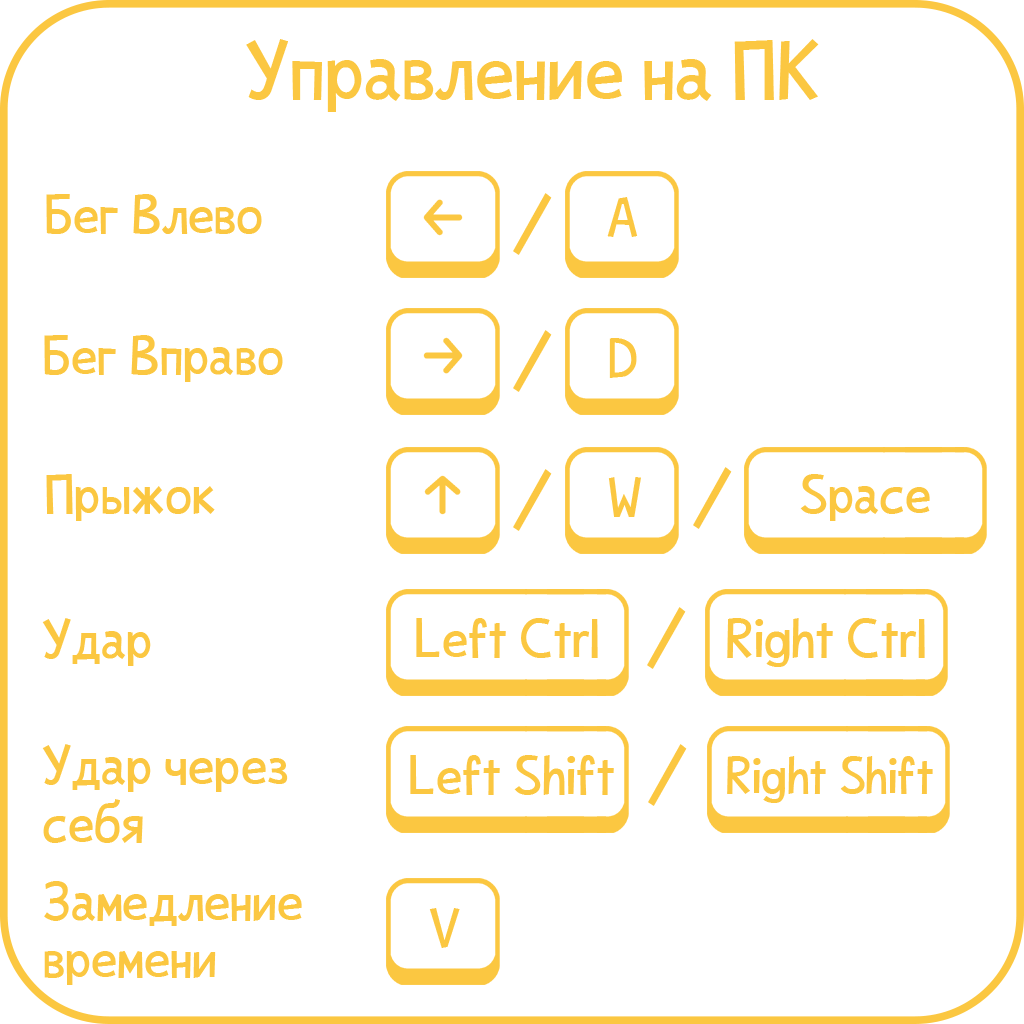
<style>
.page{position:relative;width:1024px;height:1024px;background:#ffffff}
.page>*{position:absolute;margin:0}
.t1{font:72px "CrazyV1";color:#fbc741}
.t2{font:48px "CrazyV1";color:#fbc741}
.t3{font:45px "CrazyV1";color:#fbc741}
</style>
<div class="page">
<p class="t1" style="left:246px;top:39px;width:573px;height:73px">Управление на ПК</p>
<p class="t2" style="left:46px;top:194px;width:216px;height:40px">Бег Влево</p>
<p class="t1" style="left:513px;top:193px;width:39px;height:62px">/</p>
<p class="t2" style="left:44px;top:335px;width:239px;height:47px">Бег Вправо</p>
<p class="t1" style="left:513px;top:330px;width:39px;height:62px">/</p>
<p class="t2" style="left:609px;top:338px;width:28px;height:40px">D</p>
<p class="t1" style="left:513px;top:469px;width:39px;height:62px">/</p>
<p class="t1" style="left:693px;top:467px;width:39px;height:62px">/</p>
<p class="t2" style="left:46px;top:474px;width:169px;height:47px">Прыжок</p>
<p class="t2" style="left:608px;top:477px;width:33px;height:40px">W</p>
<p class="t2" style="left:800px;top:474px;width:130px;height:47px">Space</p>
<p class="t1" style="left:647px;top:607px;width:39px;height:62px">/</p>
<p class="t2" style="left:42px;top:618px;width:109px;height:48px">Удар</p>
<p class="t2" style="left:416px;top:618px;width:182px;height:40px">Left Ctrl</p>
<p class="t2" style="left:727px;top:618px;width:198px;height:49px">Right Ctrl</p>
<p class="t2" style="left:42px;top:744px;width:246px;height:99px">Удар через<br>себя</p>
<p class="t1" style="left:648px;top:744px;width:39px;height:62px">/</p>
<p class="t2" style="left:410px;top:755px;width:204px;height:40px">Left Shift</p>
<p class="t3" style="left:727px;top:756px;width:206px;height:47px">Right Shift</p>
<p class="t2" style="left:44px;top:881px;width:258px;height:104px">Замедление<br>времени</p>
<p class="t2" style="left:429px;top:908px;width:31px;height:40px">V</p>
</div>
